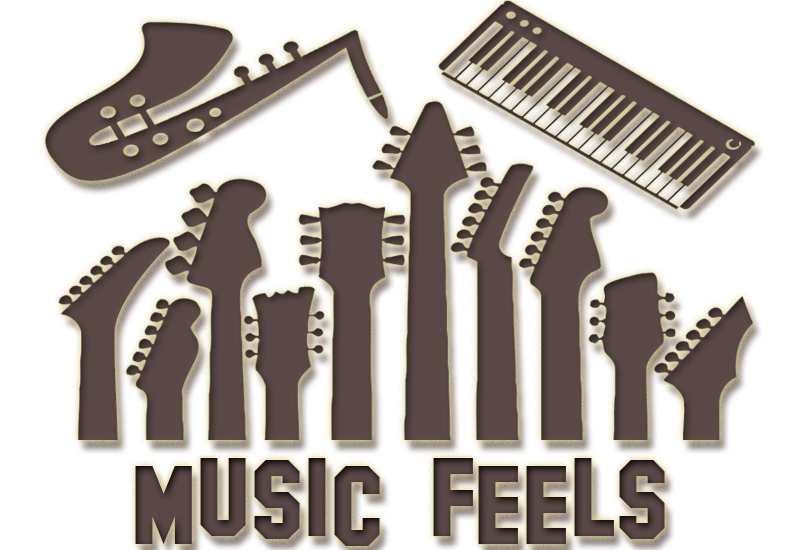
<style>
.page{position:relative;width:800px;height:550px;background:#ffffff}
.page>*{position:absolute;margin:0}
.t1{font:112.5px "HollywoodHills";color:#594845}
</style>
<div class="page">
<p class="t1" style="left:135px;top:458px;width:530px;height:88px">MUSIC FEELS</p>
</div>
